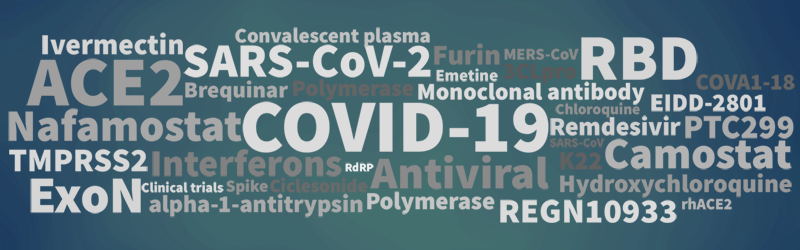
<style>
.page{position:relative;width:800px;height:250px}
.page>*{position:absolute;margin:0}
.t1{font:20.7px "SourceSansRoman-Black";color:#c1c1c1}
.t2{font:29.2px "SourceSansRoman-Black";color:#d5d5d5}
.t3{font:64.9px "SourceSansRoman-Black";color:#d6d6d6}
.t4{font:48px "SourceSansRoman-Black";color:#dfdfdf}
.t5{font:28.7px "SourceSansRoman-Black";color:#7f7f7f}
.t6{font:16.3px "SourceSansRoman-Black";color:#8a8a8a}
.t7{font:70.2px "SourceSansRoman-Black";color:#9f9f9f}
.t8{font:23px "SourceSansRoman-Black";color:#5a5a5a}
.t9{font:16.7px "SourceSansRoman-Black";color:#d5d5d5}
.t10{font:23.2px "SourceSansRoman-Black";color:#656565}
.t11{font:23px "SourceSansRoman-Black";color:#ababab}
.t12{font:23.9px "SourceSansRoman-Black";color:#dcdcdc}
.t13{font:75.1px "SourceSansRoman-Black";color:#dcdcdc}
.t14{font:15.3px "SourceSansRoman-Black";color:#929292}
.t15{font:25.1px "SourceSansRoman-Black";color:#d6d6d6}
.t16{font:45.1px "SourceSansRoman-Black";color:#a8a8a8}
.t17{font:25.7px "SourceSansRoman-Black";color:#d0d0d0}
.t18{font:33.5px "SourceSansRoman-Black";color:#ababab}
.t19{font:33.2px "SourceSansRoman-Black";color:#d8d8d8}
.t20{font:37.6px "SourceSansRoman-Black";color:#818181}
.t21{font:12.4px "SourceSansRoman-Black";color:#707070}
.t22{font:44.2px "SourceSansRoman-Black";color:#b3b3b3}
.t23{font:45.4px "SourceSansRoman-Black";color:#8a8a8a}
.t24{font:25.5px "SourceSansRoman-Black";color:#616161}
.t25{font:11.7px "SourceSansRoman-Black";color:#eeeeee}
.t26{font:25.4px "SourceSansRoman-Black";color:#989898}
.t27{font:52.1px "SourceSansRoman-Black";color:#d5d5d5}
.t28{font:13.8px "SourceSansRoman-Black";color:#dadada}
.t29{font:17px "SourceSansRoman-Black";color:#929292}
.t30{font:19px "SourceSansRoman-Black";color:#6a6a6a}
.t31{font:24.5px "SourceSansRoman-Black";color:#ababab}
.t32{font:24.6px "SourceSansRoman-Black";color:#c5c5c5}
.t33{font:15.7px "SourceSansRoman-Black";color:#b3b3b3}
.t34{font:34.4px "SourceSansRoman-Black";color:#dcdcdc}
</style>
<div class="page">
<p class="t1" style="left:235px;top:27px;width:195px;height:20px">Convalescent plasma</p>
<p class="t2" style="left:42px;top:32px;width:141px;height:23px">Ivermectin</p>
<p class="t3" style="left:581px;top:37px;width:117px;height:43px">RBD</p>
<p class="t4" style="left:183px;top:44px;width:248px;height:34px">SARS-CoV-2</p>
<p class="t5" style="left:434px;top:43px;width:66px;height:22px">Furin</p>
<p class="t6" style="left:504px;top:48px;width:75px;height:12px">MERS-CoV</p>
<p class="t7" style="left:26px;top:58px;width:157px;height:49px">ACE2</p>
<p class="t8" style="left:503px;top:63px;width:74px;height:20px">3CLpro</p>
<p class="t9" style="left:436px;top:68px;width:62px;height:14px">Emetine</p>
<p class="t10" style="left:696px;top:74px;width:99px;height:16px">COVA1-18</p>
<p class="t11" style="left:185px;top:80px;width:103px;height:22px">Brequinar</p>
<p class="t10" style="left:293px;top:79px;width:121px;height:22px">Polymerase</p>
<p class="t12" style="left:418px;top:81px;width:227px;height:24px">Monoclonal antibody</p>
<p class="t13" style="left:242px;top:101px;width:307px;height:52px">COVID-19</p>
<p class="t14" style="left:555px;top:102px;width:85px;height:16px">Chloroquine</p>
<p class="t15" style="left:651px;top:94px;width:115px;height:18px">EIDD-2801</p>
<p class="t16" style="left:8px;top:108px;width:234px;height:34px">Nafamostat</p>
<p class="t17" style="left:550px;top:115px;width:131px;height:21px">Remdesivir</p>
<p class="t18" style="left:685px;top:115px;width:109px;height:24px">PTC299</p>
<p class="t19" style="left:9px;top:149px;width:139px;height:23px">TMPRSS2</p>
<p class="t20" style="left:152px;top:149px;width:190px;height:28px">Interferons</p>
<p class="t21" style="left:550px;top:138px;width:55px;height:10px">SARS-CoV</p>
<p class="t22" style="left:605px;top:138px;width:187px;height:32px">Camostat</p>
<p class="t23" style="left:370px;top:155px;width:179px;height:35px">Antiviral</p>
<p class="t24" style="left:560px;top:152px;width:42px;height:18px">K22</p>
<p class="t25" style="left:345px;top:162px;width:29px;height:10px">RdRP</p>
<p class="t26" style="left:560px;top:173px;width:232px;height:25px">Hydroxychloroquine</p>
<p class="t27" style="left:30px;top:178px;width:111px;height:36px">ExoN</p>
<p class="t28" style="left:141px;top:181px;width:83px;height:12px">Clinical trials</p>
<p class="t29" style="left:226px;top:179px;width:42px;height:16px">Spike</p>
<p class="t30" style="left:270px;top:177px;width:98px;height:16px">Ciclesonide</p>
<p class="t31" style="left:149px;top:193px;width:214px;height:25px">alpha-1-antitrypsin</p>
<p class="t32" style="left:367px;top:191px;width:128px;height:24px">Polymerase</p>
<p class="t33" style="left:682px;top:197px;width:50px;height:13px">rhACE2</p>
<p class="t34" style="left:500px;top:199px;width:177px;height:24px">REGN10933</p>
</div>
